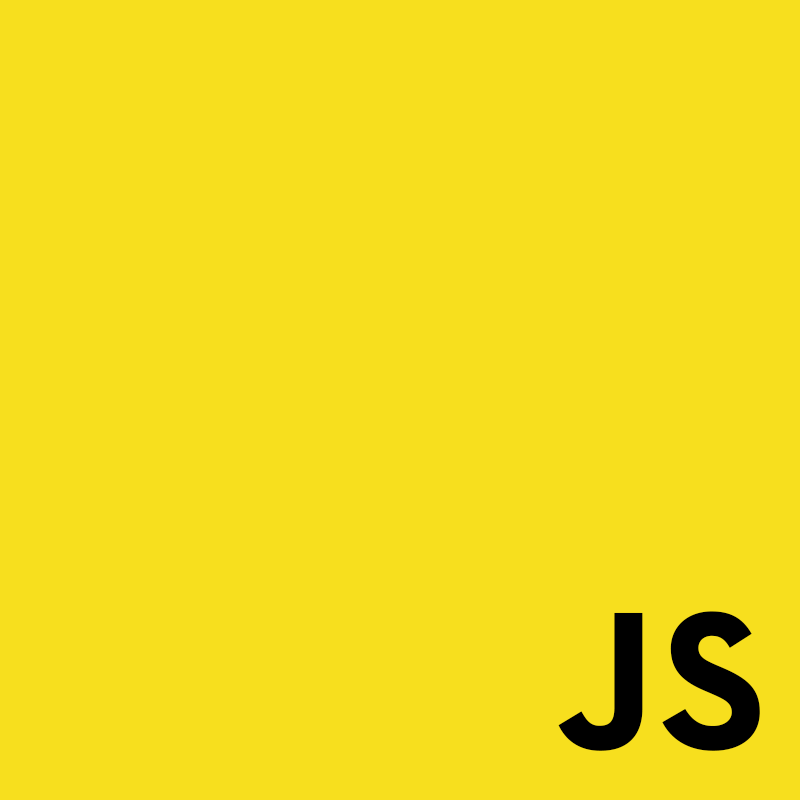
<style>
.page{position:relative;width:800px;height:800px;background:#f7df1e}
.page>*{position:absolute;margin:0}
.t1{font:200px "NeutraText-Bold";letter-spacing:0.025em;color:#000000}
</style>
<div class="page">
<p class="t1" style="left:558px;top:611px;width:202px;height:140px">JS</p>
</div>
